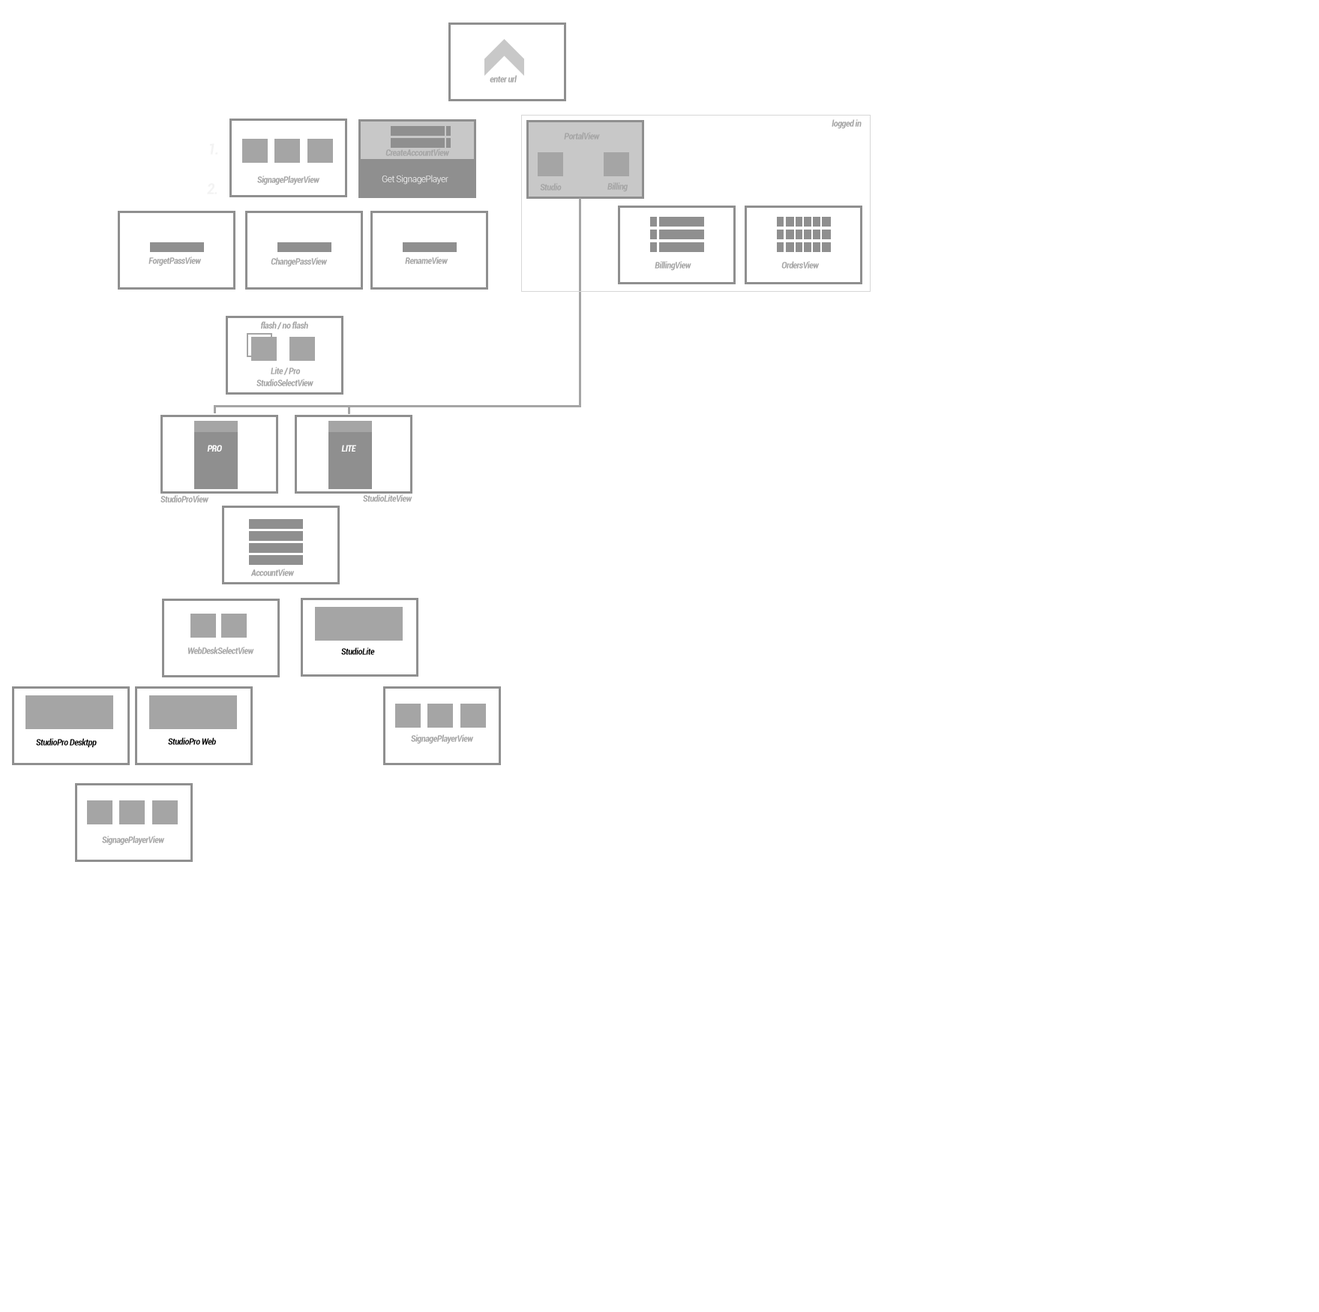
<style>
.page{position:relative;width:1319px;height:1312px;background:#ffffff}
.page>*{position:absolute;margin:0}
.t1{font:9px "Roboto-BoldCondensedItalic";letter-spacing:-0.04em;color:#a5a5a5}
.t2{font:15px "Roboto-BoldCondensedItalic";letter-spacing:-0.04em;color:#f3f3f3}
.t3{font:9px "Roboto-Light";letter-spacing:-0.04em;color:#ffffff}
.t4{font:9px "Roboto-BoldCondensedItalic";letter-spacing:-0.04em;color:#ffffff}
.t5{font:9px "Roboto-BoldCondensedItalic";letter-spacing:-0.04em;color:#000000}
</style>
<div class="page">
<p class="t1" style="left:490px;top:75px;width:28px;height:7px">enter url</p>
<p class="t1" style="left:832px;top:119px;width:30px;height:10px">logged in</p>
<p class="t1" style="left:564px;top:132px;width:36px;height:8px">PortalView</p>
<p class="t2" style="left:209px;top:143px;width:9px;height:11px">1.</p>
<p class="t1" style="left:386px;top:148px;width:64px;height:8px">CreateAccountView</p>
<p class="t2" style="left:207px;top:183px;width:11px;height:11px">2.</p>
<p class="t1" style="left:257px;top:176px;width:63px;height:9px">SignagePlayerView</p>
<p class="t3" style="left:382px;top:175px;width:66px;height:9px">Get SignagePlayer</p>
<p class="t1" style="left:540px;top:183px;width:22px;height:7px">Studio</p>
<p class="t1" style="left:608px;top:182px;width:20px;height:10px">Billing</p>
<p class="t1" style="left:148px;top:256px;width:54px;height:10px">ForgetPassView</p>
<p class="t1" style="left:271px;top:257px;width:57px;height:10px">ChangePassView</p>
<p class="t1" style="left:405px;top:256px;width:43px;height:8px">RenameView</p>
<p class="t1" style="left:655px;top:261px;width:37px;height:10px">BillingView</p>
<p class="t1" style="left:782px;top:261px;width:38px;height:7px">OrdersView</p>
<p class="t1" style="left:261px;top:321px;width:47px;height:8px">flash / no flash</p>
<p class="t1" style="left:271px;top:367px;width:30px;height:8px">Lite / Pro</p>
<p class="t1" style="left:256px;top:379px;width:58px;height:7px">StudioSelectView</p>
<p class="t4" style="left:207px;top:445px;width:15px;height:7px">PRO</p>
<p class="t4" style="left:341px;top:445px;width:15px;height:7px">LITE</p>
<p class="t1" style="left:160px;top:495px;width:49px;height:7px">StudioProView</p>
<p class="t1" style="left:363px;top:494px;width:49px;height:8px">StudioLiteView</p>
<p class="t1" style="left:250px;top:568px;width:45px;height:8px">AccountView</p>
<p class="t1" style="left:188px;top:646px;width:66px;height:8px">WebDeskSelectView</p>
<p class="t5" style="left:341px;top:647px;width:34px;height:8px">StudioLite</p>
<p class="t5" style="left:168px;top:737px;width:48px;height:8px">StudioPro Web</p>
<p class="t1" style="left:411px;top:734px;width:63px;height:10px">SignagePlayerView</p>
<p class="t5" style="left:36px;top:738px;width:61px;height:10px">StudioPro Desktpp</p>
<p class="t1" style="left:102px;top:836px;width:63px;height:9px">SignagePlayerView</p>
</div>
